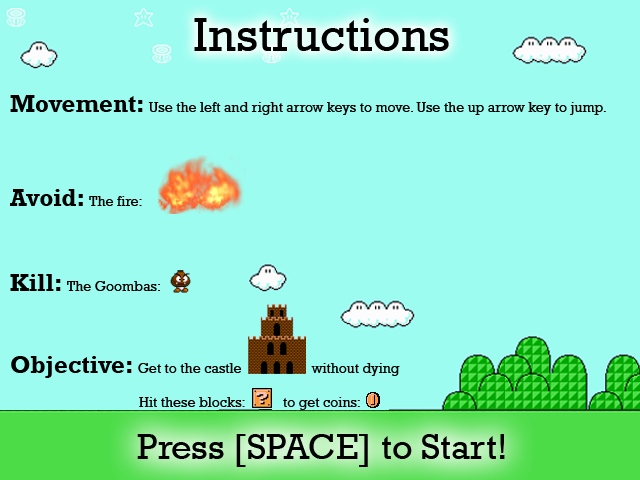
<style>
.page{position:relative;width:640px;height:480px;background:#9cfcf0}
.page>*{position:absolute;margin:0}
.t1{font:14px "Rockwell";color:#000000}
.t2{font:24px "Rockwell-Bold";color:#000000}
</style>
<div class="page">
<p class="t1" style="left:10px;top:95px;width:596px;height:20px"><span class="t2">Movement: </span>Use the left and right arrow keys to move. Use the up arrow key to jump.</p>
<p class="t1" style="left:10px;top:189px;width:132px;height:17px"><span class="t2">Avoid: </span>The fire:</p>
<p class="t1" style="left:10px;top:274px;width:150px;height:17px"><span class="t2">Kill: </span>The Goombas:</p>
<p class="t1" style="left:11px;top:356px;width:389px;height:54px"><span class="t2">Objective: </span>Get to the castle                    without dying<br><br>         Hit these blocks:           to get coins:</p>
</div>
